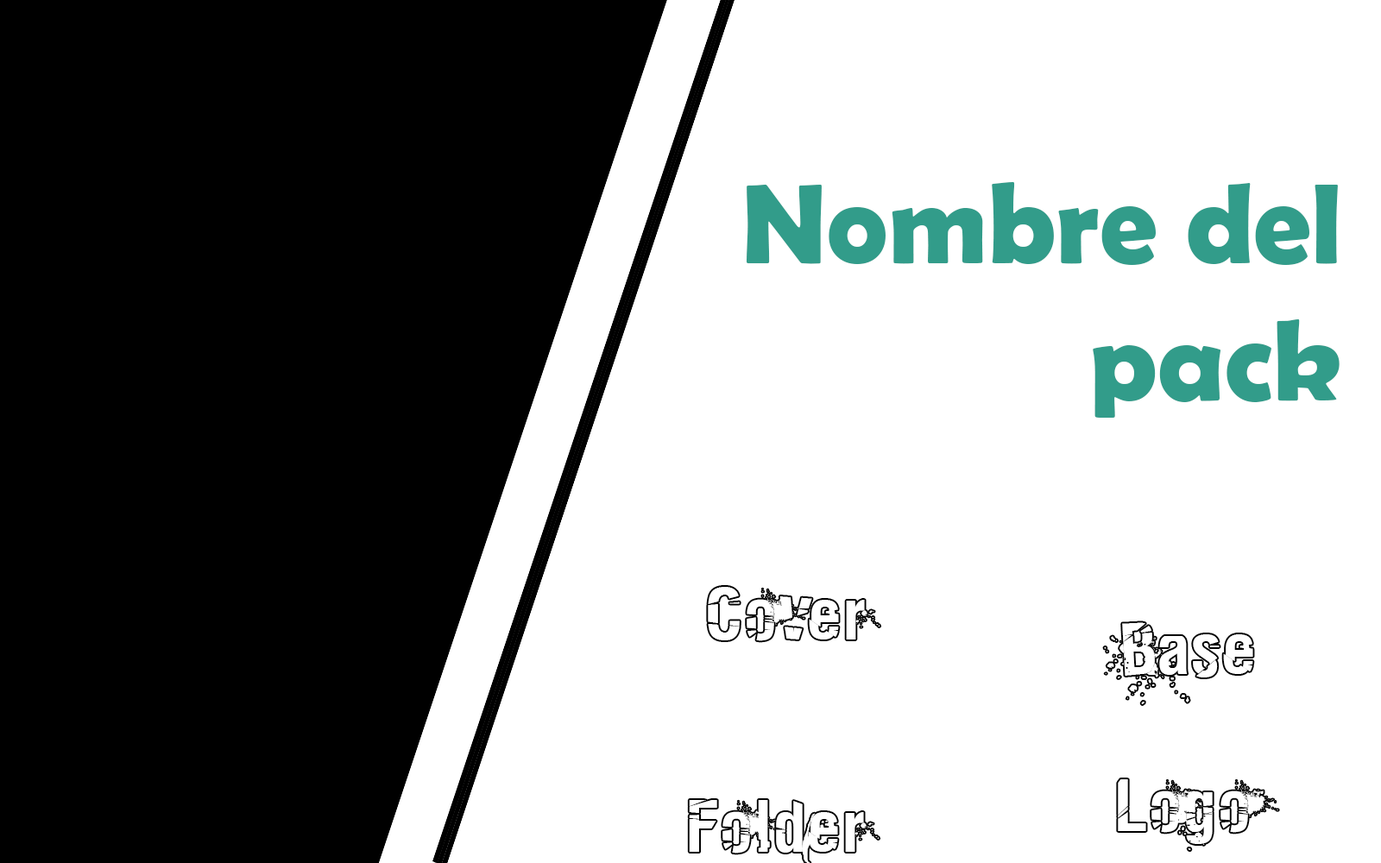
<style>
.page{position:relative;width:1381px;height:863px;background:#ffffff}
.page>*{position:absolute;margin:0}
.t1{font:114.8px "BerlinSansFBDemi-Bold";color:#329c8a}
.t2{font:69.1px "KeetanoKatanaKillBill-Bold";color:#ffffff}
</style>
<div class="page">
<p class="t1" style="left:747px;top:182px;width:593px;height:236px;text-align:right">Nombre del<br>pack</p>
<p class="t2" style="left:708px;top:587px;width:173px;height:54px">Cover</p>
</div>
